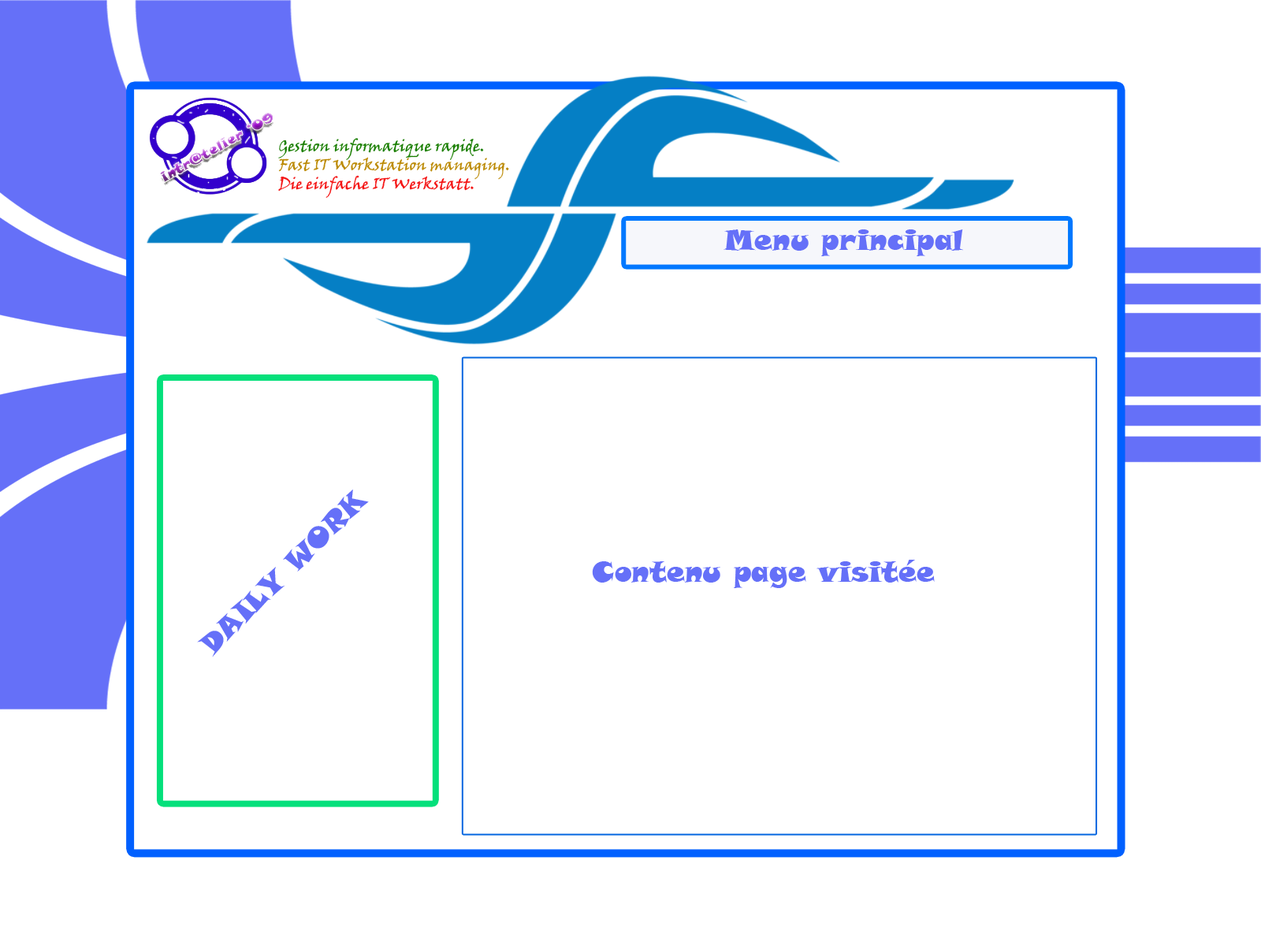
<style>
.page{position:relative;width:1261px;height:946px;background:#ffffff}
.page>*{position:absolute;margin:0}
.t1{font:15.8px "VinerHandITC";color:#bb8902}
.t2{font:15.8px "VinerHandITC";color:#197e01}
.t3{font:15.8px "VinerHandITC";color:#f41313}
.t4{font:28.4px "SnapITC-Regular";color:#6570f8}
</style>
<div class="page">
<p class="t1" style="left:278px;top:138px;width:231px;height:60px"><span class="t2">Gestion informatique rapide.<br></span>Fast IT Workstation managing.<br><span class="t3">Die einfache IT Werkstatt.</span></p>
<p class="t4" style="left:723px;top:229px;width:240px;height:27px">Menu principal</p>
<p class="t4" style="left:197px;top:489px;width:172px;height:168px;rotate:-45deg">DAILY WORK</p>
<p class="t4" style="left:592px;top:560px;width:343px;height:28px">Contenu page visitée</p>
</div>
